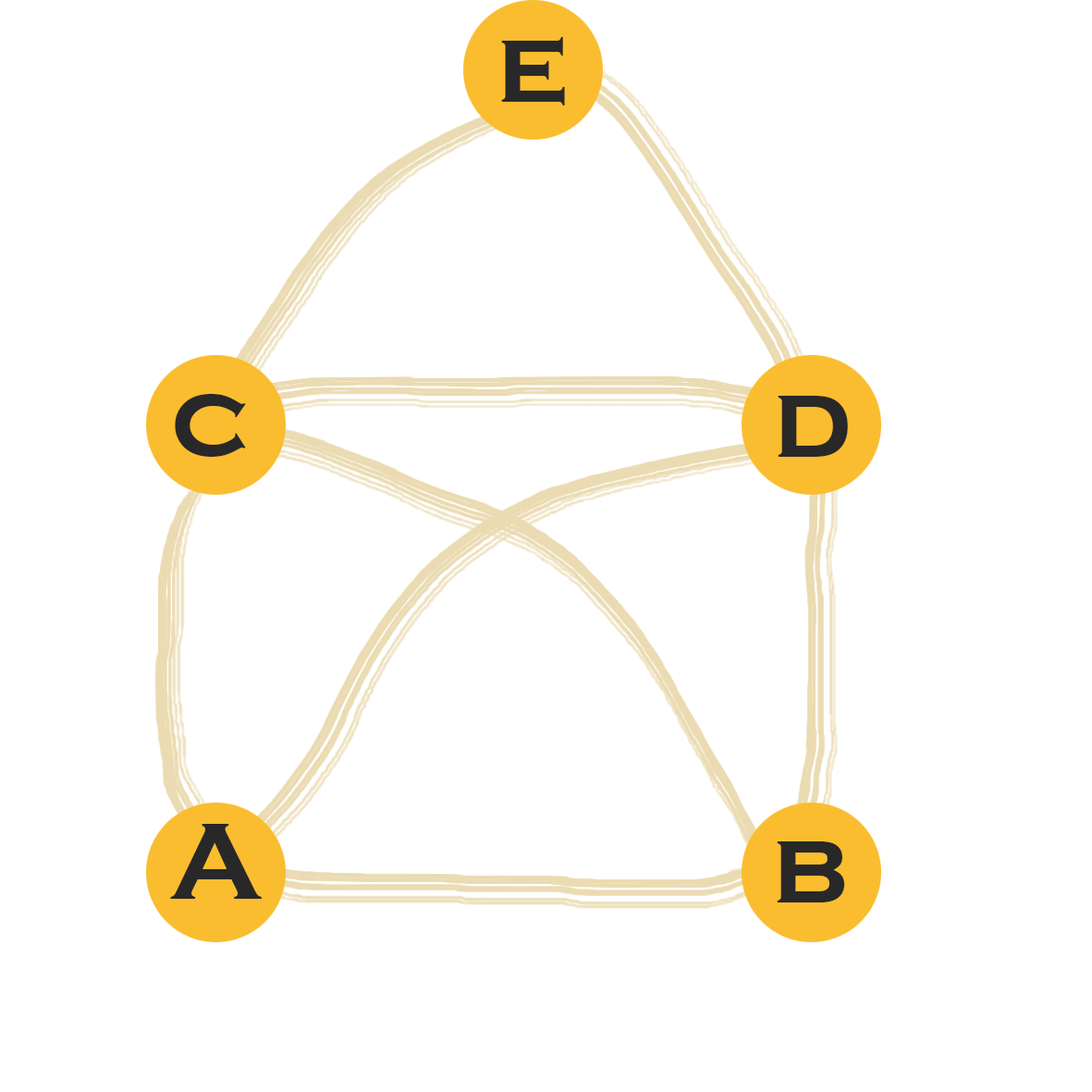
<style>
.page{position:relative;width:1092px;height:1092px;background:#ffffff}
.page>*{position:absolute;margin:0}
.t1{font:111.7px "CopperplateGothic-Bold";color:#282828}
</style>
<div class="page">
<p class="t1" style="left:175px;top:394px;width:71px;height:63px">c</p>
<p class="t1" style="left:778px;top:396px;width:70px;height:61px">d</p>
<p class="t1" style="left:170px;top:824px;width:92px;height:75px">A</p>
<p class="t1" style="left:777px;top:841px;width:68px;height:61px">b</p>
</div>
